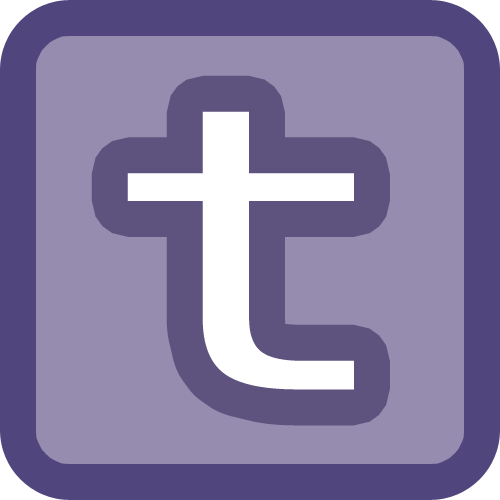
<style>
.page{position:relative;width:500px;height:500px;background:#968caf}
.page>*{position:absolute;margin:0}
.t1{font:395px "Menlo-Regular";color:#ffffff;scale:1.3 1}
</style>
<div class="page">
<p class="t1" style="left:127px;top:111px;width:227px;height:279px">t</p>
</div>
